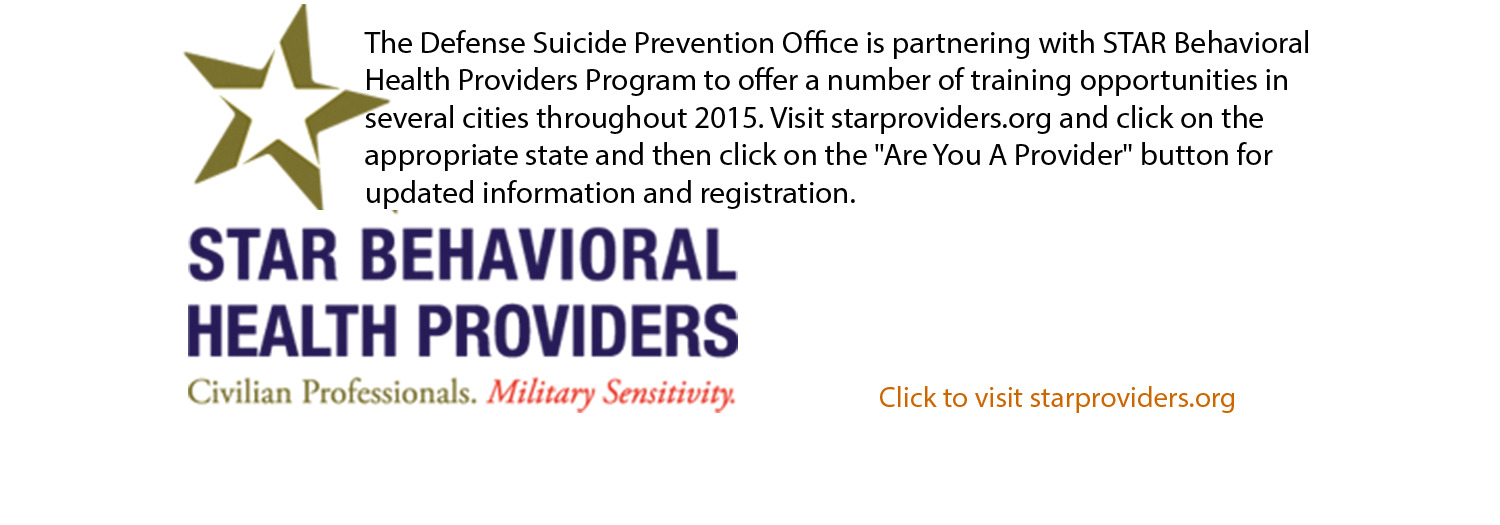
<style>
.page{position:relative;width:1500px;height:525px;background:#ffffff}
.page>*{position:absolute;margin:0}
.t1{font:31.3px "MyriadPro-Regular";color:#000000}
.t2{font:29.2px "MyriadPro-Regular";color:#cc6600}
</style>
<div class="page">
<p class="t1" style="left:364px;top:30px;width:944px;height:179px">The Defense Suicide Prevention Office is partnering with STAR Behavioral Health Providers Program to offer a number of training opportunities in several cities throughout 2015. Visit starproviders.org and click on the appropriate state and then click on the "Are You A Provider" button for updated information and registration.</p>
<p class="t2" style="left:880px;top:386px;width:354px;height:27px">Click to visit starproviders.org</p>
</div>
